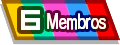
<style>
.page{position:relative;width:120px;height:45px}
.page>*{position:absolute;margin:0}
.t1{font:20px "RodinPro-DB";letter-spacing:-0.05em;color:#fffeef;scale:0.7 1}
</style>
<div class="page">
<p class="t1" style="left:47px;top:13px;width:59px;height:17px">Membros</p>
</div>
